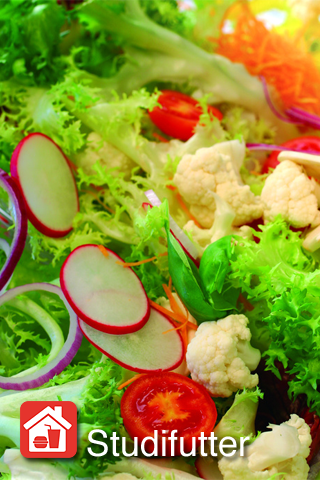
<style>
.page{position:relative;width:320px;height:480px}
.page>*{position:absolute;margin:0}
.t1{font:36px "Helvetica";color:#ffffff}
</style>
<div class="page">
<p class="t1" style="left:87px;top:429px;width:163px;height:28px">Studifutter</p>
</div>
